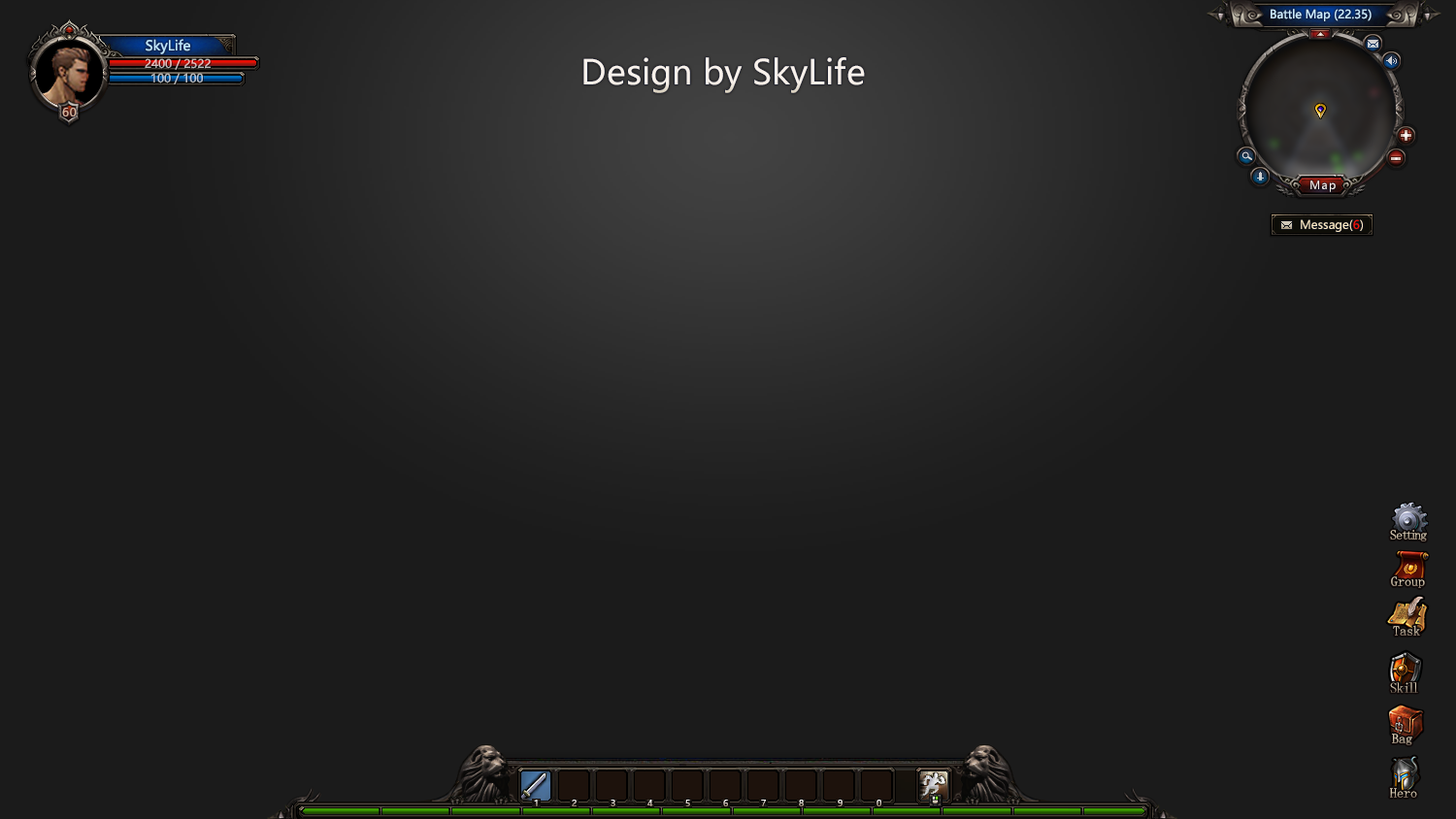
<style>
.page{position:relative;width:1456px;height:819px;background:#1b1b1b}
.page>*{position:absolute;margin:0}
.t1{font:11.6px "MicrosoftYaHei";color:#cdebfc}
.t2{font:13.6px "MicrosoftYaHei";color:#bfe6fc}
.t3{font:11.6px "MicrosoftYaHei"}
.t4{font:33.8px "MicrosoftYaHei";color:#f8f1eb}
.t5{font:11.6px "MicrosoftYaHei";letter-spacing:0.05em;color:#d6b49a}
.t6{font:20.4px "MicrosoftYaHei";font-weight:bold}
.t7{font:11.2px "MicrosoftYaHei";letter-spacing:0.1em;color:#f8f1eb}
.t8{font:11.6px "MicrosoftYaHei";color:#ffecc6}
.t9{font:11.6px "MicrosoftYaHei";color:#ff1000}
.t10{font:13.6px "LiSu";letter-spacing:-0.19em;color:#c7baa4}
.t11{font:13.6px "LiSu";letter-spacing:-0.07em;color:#c7baa4}
.t12{font:13.6px "LiSu"}
.t13{font:14.6px "LiSu";letter-spacing:-0.19em}
.t14{font:14.6px "LiSu";letter-spacing:-0.05em}
.t15{font:8.7px "MicrosoftYaHei"}
.t16{font:8.7px "MicrosoftYaHei";color:#a08e7b}
.t17{font:8.7px "MicrosoftYaHei";color:#afa090}
.t18{font:8.7px "MicrosoftYaHei";color:#ffffff}
</style>
<div class="page">
<p class="t1" style="left:1270px;top:9px;width:101px;height:12px">Battle Map (22.35)</p>
<p class="t2" style="left:146px;top:39px;width:44px;height:15px">SkyLife</p>
<p class="t3" style="left:145px;top:58px;width:66px;height:12px">2400 / 2522</p>
<p class="t4" style="left:583px;top:57px;width:282px;height:36px">Design by SkyLife</p>
<p class="t3" style="left:151px;top:73px;width:52px;height:11px">100 / 100</p>
<p class="t5" style="left:62px;top:108px;width:15px;height:8px">60</p>
<p class="t6" style="left:1400px;top:130px;width:11px;height:11px">+</p>
<p class="t7" style="left:1310px;top:181px;width:25px;height:11px">Map</p>
<p class="t8" style="left:1300px;top:219px;width:63px;height:13px">Message(<span class="t9">6</span>)</p>
<p class="t10" style="left:1390px;top:530px;width:37px;height:12px"><span class="t11">Se</span>tti<span class="t11">ng</span></p>
<p class="t12" style="left:1391px;top:576px;width:34px;height:12px">Group</p>
<p class="t12" style="left:1393px;top:625px;width:27px;height:11px">Task</p>
<p class="t13" style="left:1390px;top:682px;width:28px;height:11px"><span class="t14">Sk</span>ill</p>
<p class="t12" style="left:1392px;top:734px;width:20px;height:11px">Bag</p>
<p class="t12" style="left:1390px;top:788px;width:27px;height:10px">Hero</p>
<p class="t15" style="left:534px;top:800px;width:4px;height:6px">1</p>
<p class="t16" style="left:572px;top:800px;width:4px;height:6px">2</p>
<p class="t15" style="left:610px;top:800px;width:5px;height:6px">3</p>
<p class="t17" style="left:647px;top:800px;width:6px;height:6px">4</p>
<p class="t15" style="left:685px;top:800px;width:5px;height:6px">5</p>
<p class="t15" style="left:723px;top:800px;width:5px;height:6px">6</p>
<p class="t18" style="left:761px;top:800px;width:5px;height:6px">7</p>
<p class="t15" style="left:799px;top:800px;width:5px;height:6px">8</p>
<p class="t15" style="left:838px;top:800px;width:4px;height:6px">9</p>
<p class="t15" style="left:876px;top:800px;width:5px;height:6px">0</p>
</div>
